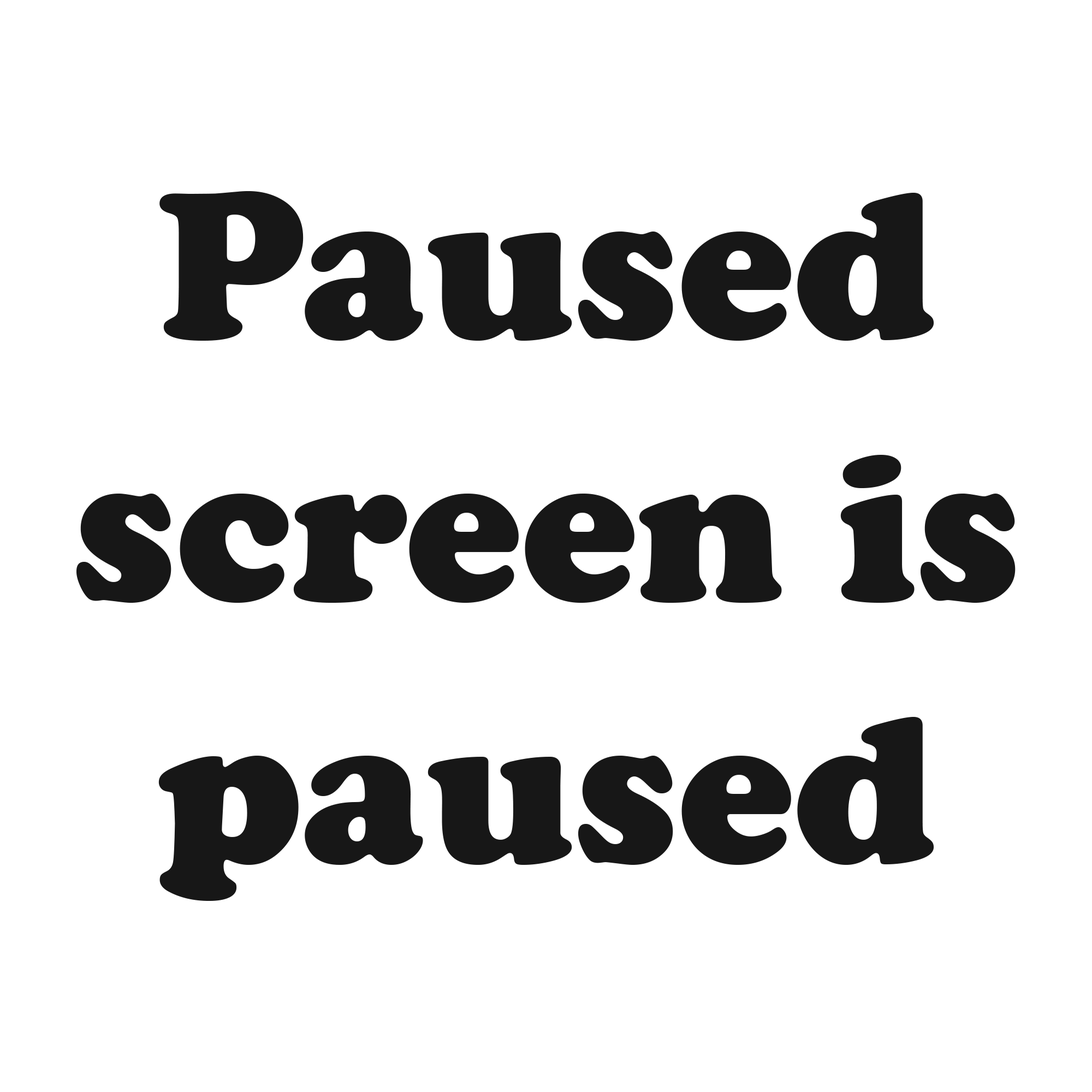
<style>
.page{position:relative;width:1092px;height:1092px;background:#ffffff}
.page>*{position:absolute;margin:0}
.t1{font:218.4px "CooperBlack";color:#171717}
</style>
<div class="page">
<p class="t1" style="left:76px;top:191px;width:940px;height:710px;text-align:center">Paused<br>screen is<br>paused</p>
</div>
